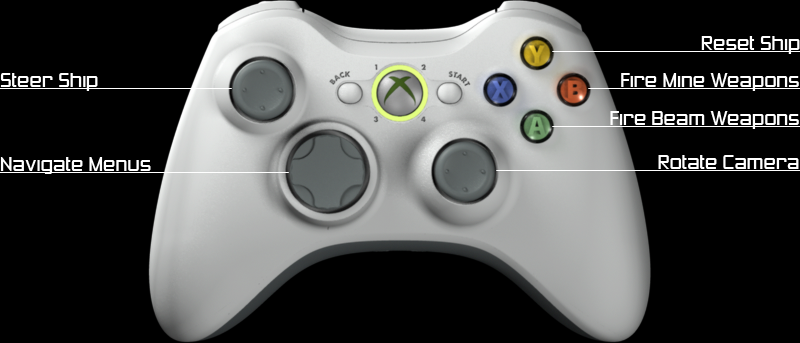
<style>
.page{position:relative;width:800px;height:343px;background:#000000}
.page>*{position:absolute;margin:0}
.t1{font:18px "ZeroesThree";color:#ffffff}
</style>
<div class="page">
<p class="t1" style="left:701px;top:36px;width:99px;height:18px">Reset Ship</p>
<p class="t1" style="left:0px;top:73px;width:98px;height:18px">Steer Ship</p>
<p class="t1" style="left:621px;top:73px;width:178px;height:18px">Fire Mine Weapons</p>
<p class="t1" style="left:610px;top:111px;width:189px;height:18px">Fire Beam Weapons</p>
<p class="t1" style="left:0px;top:157px;width:151px;height:17px">Navigate Menus</p>
<p class="t1" style="left:658px;top:155px;width:141px;height:14px">Rotate Camera</p>
</div>
